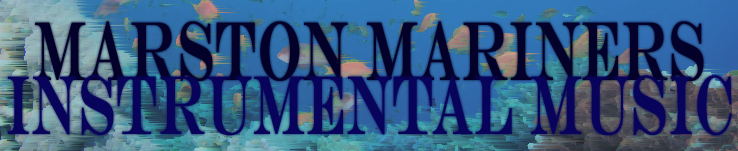
<style>
.page{position:relative;width:738px;height:151px}
.page>*{position:absolute;margin:0}
.t1{font:83.1px/54.2px "EngraversMT";letter-spacing:0.008em;color:#08045b;font-weight:bold;scale:0.55 1}
.t2{font:83.1px/54.2px "EngraversMT";letter-spacing:0.008em;color:#03012a;font-weight:bold;scale:0.55 1}
</style>
<div class="page">
<p class="t1" style="left:7px;top:21px;width:725px;height:115px;text-align:center"><span class="t2">Marston Mariners<br></span>Instrumental Music</p>
</div>
